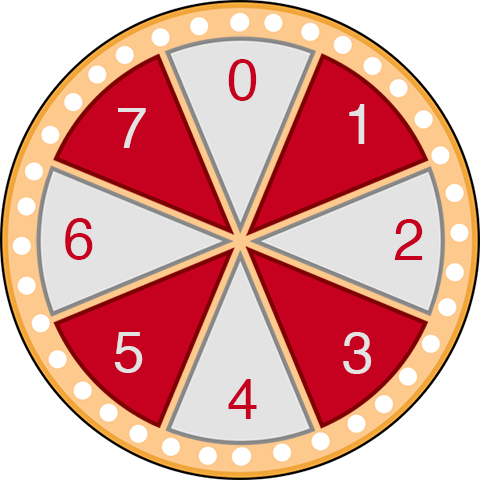
<style>
.page{position:relative;width:480px;height:480px;background:#ffffff}
.page>*{position:absolute;margin:0}
.t1{font:56.7px "Helvetica";letter-spacing:0.05em;color:#c6001f}
.t2{font:56.7px "Helvetica";letter-spacing:0.05em;color:#e3e3e3}
</style>
<div class="page">
<p class="t1" style="left:228px;top:59px;width:29px;height:42px">0</p>
<p class="t2" style="left:118px;top:108px;width:28px;height:40px">7</p>
<p class="t2" style="left:349px;top:104px;width:16px;height:40px">1</p>
<p class="t1" style="left:65px;top:218px;width:28px;height:42px">6</p>
<p class="t1" style="left:394px;top:219px;width:29px;height:41px">2</p>
<p class="t2" style="left:114px;top:332px;width:29px;height:41px">5</p>
<p class="t2" style="left:343px;top:332px;width:29px;height:42px">3</p>
<p class="t1" style="left:228px;top:379px;width:29px;height:40px">4</p>
</div>
